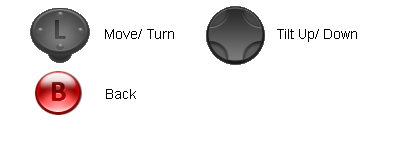
<style>
.page{position:relative;width:400px;height:150px;background:#ffffff}
.page>*{position:absolute;margin:0}
.t1{font:14px "ArialMT";color:#000000}
</style>
<div class="page">
<p class="t1" style="left:105px;top:29px;width:69px;height:10px">Move/ Turn</p>
<p class="t1" style="left:277px;top:29px;width:80px;height:13px">Tilt Up/ Down</p>
<p class="t1" style="left:106px;top:89px;width:30px;height:10px">Back</p>
</div>
